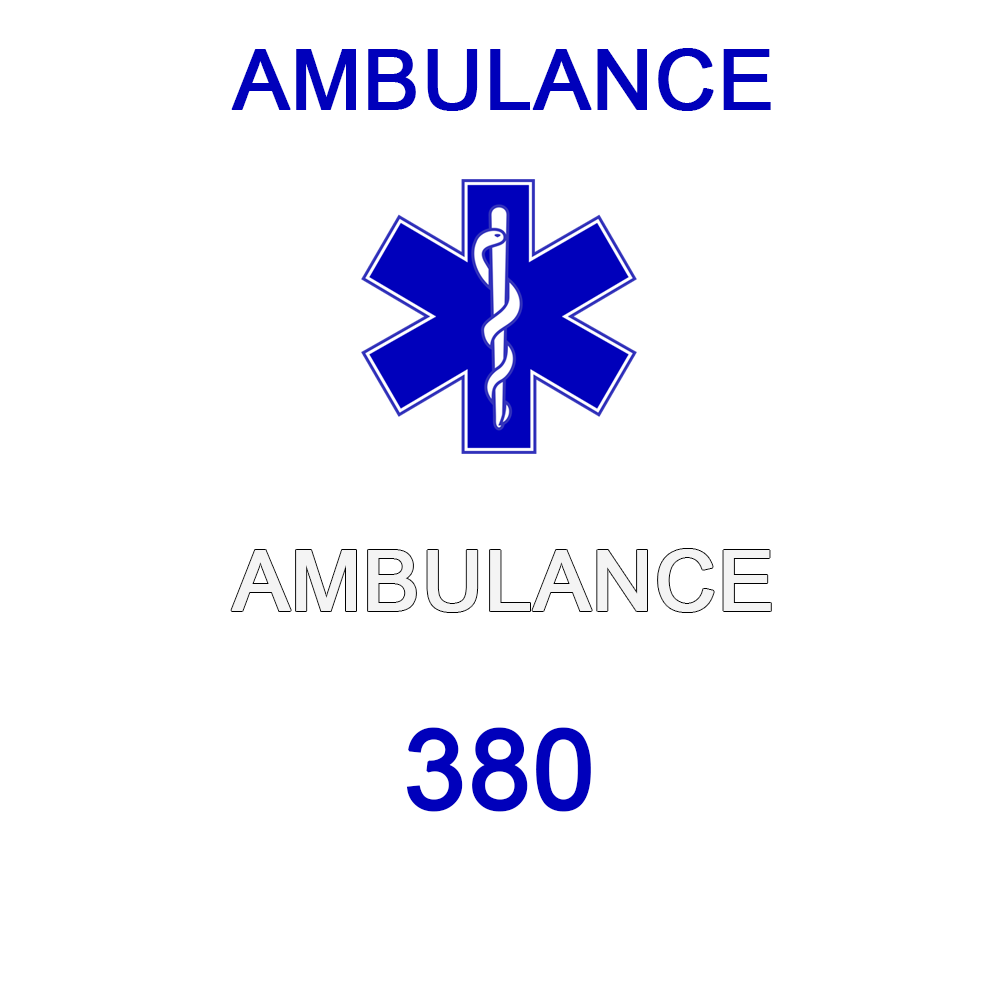
<style>
.page{position:relative;width:1000px;height:1000px;background:#ffffff}
.page>*{position:absolute;margin:0}
.t1{font:84px "ArialMT";color:#0000bb;font-weight:bold}
.t2{font:111px "ArialMT";color:#0000bb;font-weight:bold}
</style>
<div class="page">
<p class="t1" style="left:231px;top:48px;width:540px;height:63px">AMBULANCE</p>
<p class="t2" style="left:406px;top:727px;width:185px;height:85px">380</p>
</div>
